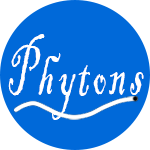
<style>
.page{position:relative;width:150px;height:150px;background:#0069d9}
.page>*{position:absolute;margin:0}
.t1{font:72px "BlackadderITC-Regular";letter-spacing:0.075em;color:#ffffff;scale:0.57 1}
</style>
<div class="page">
<p class="t1" style="left:8px;top:34px;width:136px;height:86px">Phytons</p>
</div>
